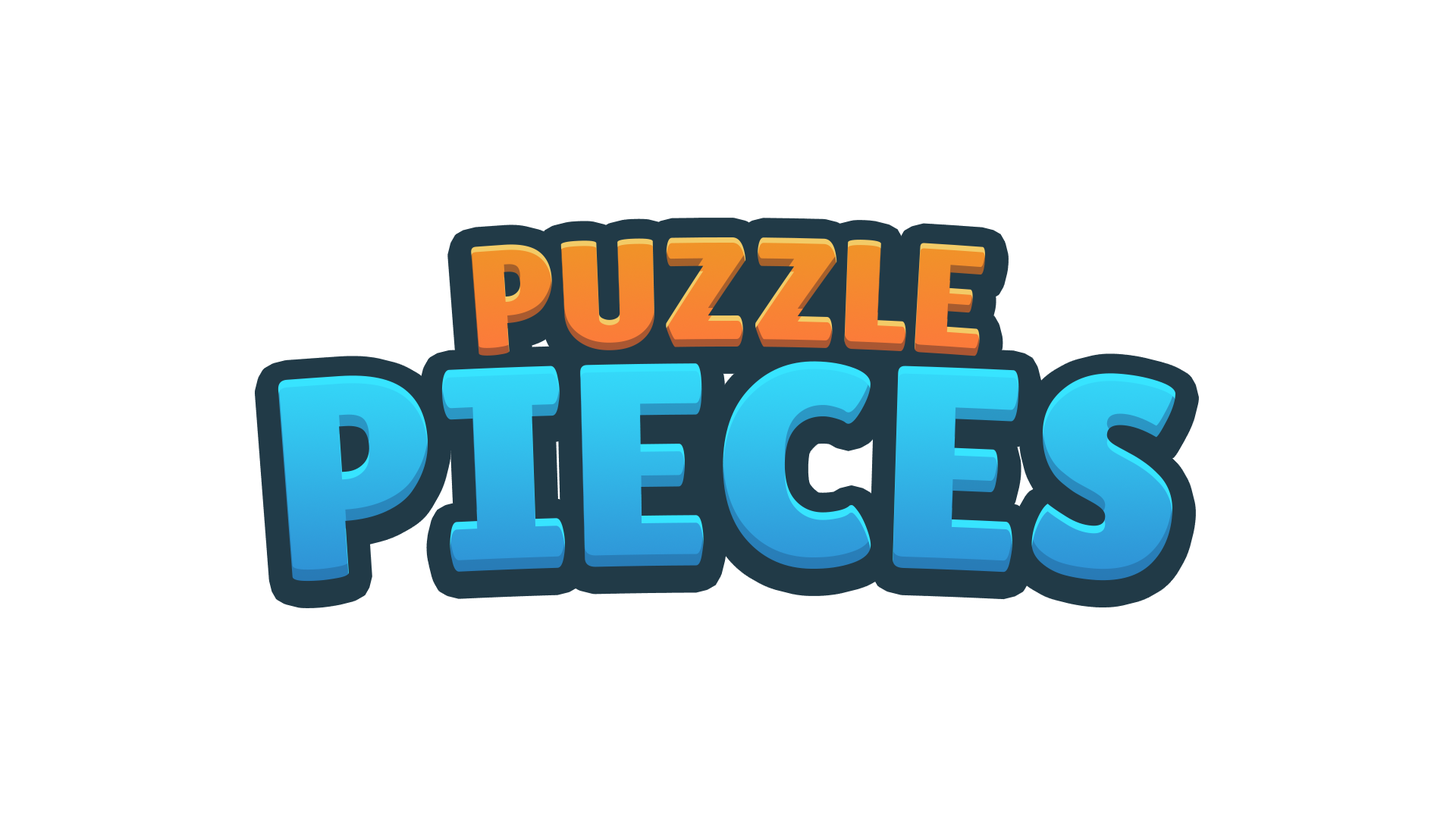
<style>
.page{position:relative;width:1456px;height:819px;background:#ffffff}
.page>*{position:absolute;margin:0}
.t1{font:155.9px "LilitaOne";color:#f48732}
.t2{font:288.4px "LilitaOne"}
</style>
<div class="page">
<p class="t1" style="left:471px;top:237px;width:515px;height:119px">PUZZLE</p>
<p class="t2" style="left:278px;top:361px;width:897px;height:221px">PIECES</p>
</div>
